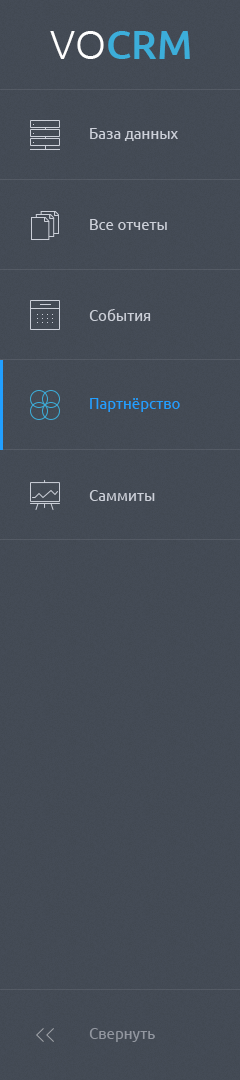
<style>
.page{position:relative;width:240px;height:1080px}
.page>*{position:absolute;margin:0}
.t1{font:40px "Ubuntu-Medium";color:#3caeda;text-transform:uppercase}
.t2{font:40px "Ubuntu-Light";color:#ffffff;text-transform:uppercase}
.t3{font:15px "Ubuntu";color:#ccd0d9}
.t4{font:15px "Ubuntu";color:#229fff}
.t5{font:15px "Ubuntu";color:#9297a0}
</style>
<div class="page">
<p class="t1" style="left:50px;top:31px;width:140px;height:28px"><span class="t2">vo</span>crm</p>
<p class="t3" style="left:90px;top:128px;width:88px;height:13px">База данных</p>
<p class="t3" style="left:90px;top:219px;width:77px;height:11px">Все отчеты</p>
<p class="t3" style="left:89px;top:309px;width:62px;height:12px">События</p>
<p class="t4" style="left:90px;top:398px;width:90px;height:14px">Партнёрство</p>
<p class="t3" style="left:89px;top:490px;width:66px;height:11px">Саммиты</p>
<p class="t5" style="left:89px;top:1028px;width:66px;height:14px">Свернуть</p>
</div>
